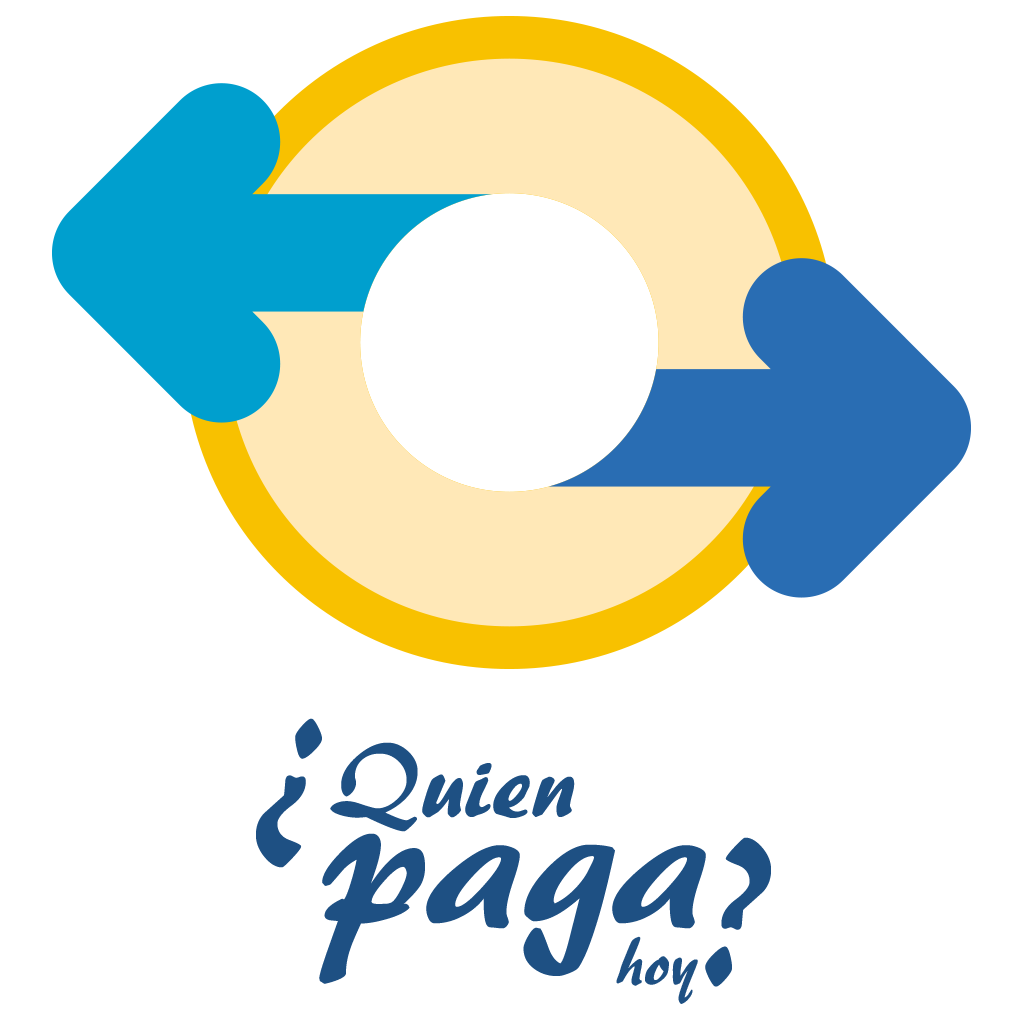
<style>
.page{position:relative;width:1024px;height:1024px;background:#ffffff}
.page>*{position:absolute;margin:0}
.t1{font:105.5px "ARBERKLEY";color:#1e5083}
.t2{font:202.9px "ARBERKLEY";color:#1e5083}
.t3{font:203.3px "ARBERKLEY";color:#1e5083}
.t4{font:68.3px "ARBERKLEY";color:#1e5083}
</style>
<div class="page">
<p class="t1" style="left:256px;top:718px;width:319px;height:150px"><span class="t2">¿</span>Quien</p>
<p class="t3" style="left:319px;top:833px;width:387px;height:151px">paga</p>
<p class="t4" style="left:616px;top:837px;width:155px;height:167px">hoy<span class="t3">?</span></p>
</div>
